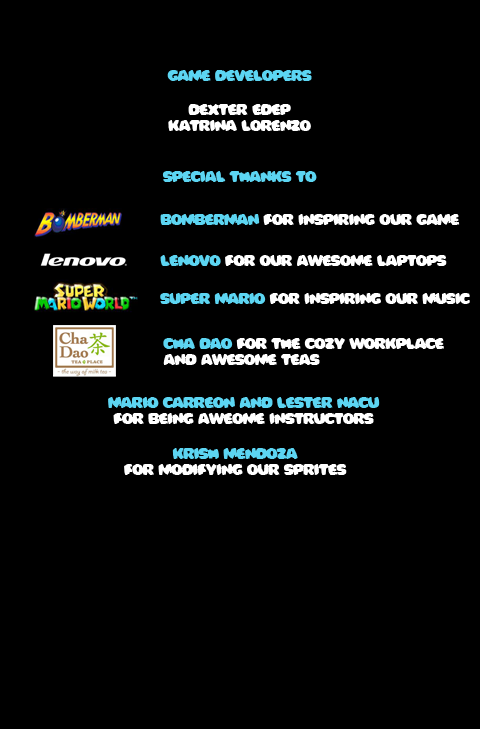
<style>
.page{position:relative;width:480px;height:729px;background:#000000}
.page>*{position:absolute;margin:0}
.t1{font:14px "Bomberman";letter-spacing:-0.025em;color:#ffffff}
.t2{font:14px "Bomberman";letter-spacing:-0.025em;color:#5cd5f2}
</style>
<div class="page">
<p class="t1" style="left:162px;top:70px;width:155px;height:112px;text-align:center"><span class="t2">game developers<br><br></span>dexter edep<br>katrina lorenzo<br><br><span class="t2"><br>special thanks to</span></p>
<p class="t1" style="left:160px;top:214px;width:300px;height:11px"><span class="t2">bomberman </span>for inspiring our game</p>
<p class="t1" style="left:160px;top:255px;width:287px;height:11px"><span class="t2">lenovo </span>for our awesome laptops</p>
<p class="t1" style="left:160px;top:293px;width:310px;height:11px"><span class="t2">super mario</span> for inspiring our music</p>
<p class="t1" style="left:163px;top:338px;width:281px;height:27px"><span class="t2">cha Dao </span>for the cozy workplace<br>and awesome teas</p>
<p class="t2" style="left:108px;top:397px;width:272px;height:27px;text-align:center">mario carreon and lester nacu<br><span class="t1">for being aweome instructors</span></p>
<p class="t1" style="left:124px;top:448px;width:223px;height:27px;text-align:center"><span class="t2">krish mendoza<br></span>for modifying our sprites</p>
</div>
